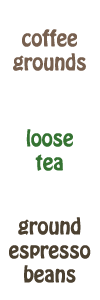
<style>
.page{position:relative;width:100px;height:300px;background:#ffffff}
.page>*{position:absolute;margin:0}
.t1{font:20px "HoboStd";color:#77604f}
.t2{font:20px "HoboStd";color:#357332}
.t3{font:20px "HoboStd";color:#4c4131}
</style>
<div class="page">
<p class="t1" style="left:13px;top:29px;width:73px;height:42px;text-align:center">coffee<br>grounds</p>
<p class="t2" style="left:26px;top:129px;width:47px;height:42px;text-align:center">loose<br>tea</p>
<p class="t3" style="left:9px;top:217px;width:82px;height:66px;text-align:center">ground<br>espresso<br>beans</p>
</div>
